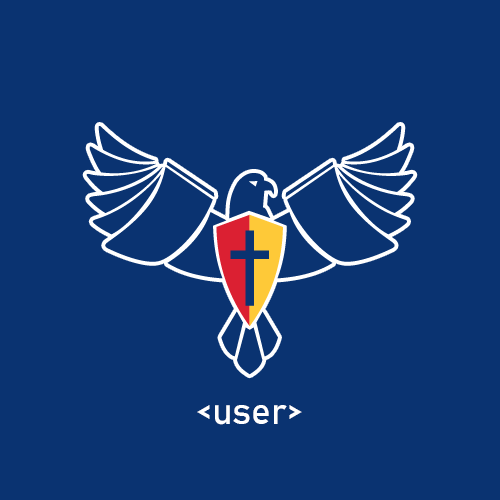
<style>
.page{position:relative;width:500px;height:500px;background:#0a3371}
.page>*{position:absolute;margin:0}
.t1{font:37px "Bahnschrift";color:#ffffff}
</style>
<div class="page">
<p class="t1" style="left:197px;top:405px;width:105px;height:20px">&lt;user&gt;</p>
</div>
